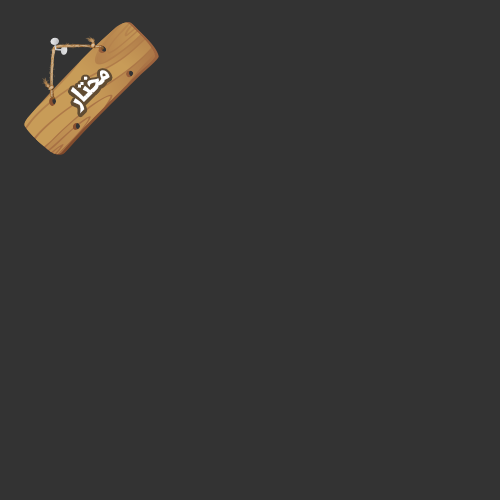
<style>
.page{position:relative;width:500px;height:500px;background:#333333}
.page>*{position:absolute;margin:0}
.t1{font:30.4px "Shorooq_N1";color:#ffffff}
</style>
<div class="page">
<p class="t1" style="left:70px;top:70px;width:40px;height:44px;rotate:-45deg">مختار</p>
</div>
